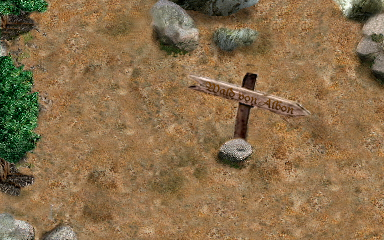
<style>
.page{position:relative;width:384px;height:240px}
.page>*{position:absolute;margin:0}
.t1{font:12px "DucDeBerry";scale:1.19 1}
</style>
<div class="page">
<p class="t1" style="left:205px;top:81px;width:89px;height:34px;rotate:16deg">Wald von Albon</p>
</div>
